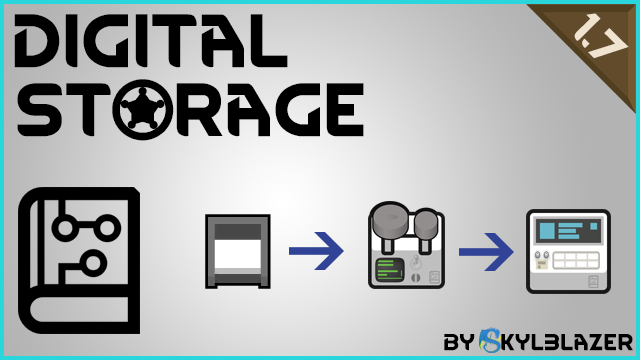
<style>
.page{position:relative;width:640px;height:360px}
.page>*{position:absolute;margin:0}
.t1{font:64px "RimWordFont";color:#000000}
.t2{font:38.9px "RimWordFont";color:#f0e3d0}
.t3{font:19.8px "RimWordFont";color:#000000}
</style>
<div class="page">
<p class="t1" style="left:14px;top:14px;width:274px;height:54px">Digital</p>
<p class="t2" style="left:574px;top:13px;width:55px;height:46px;rotate:45deg">1.7</p>
<p class="t1" style="left:17px;top:79px;width:347px;height:62px">StOrage</p>
<p class="t3" style="left:444px;top:334px;width:189px;height:17px">by   kyl3lazer</p>
</div>
